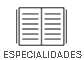
<style>
.page{position:relative;width:84px;height:60px;background:#ffffff}
.page>*{position:absolute;margin:0}
.t1{font:10px "Roboto-Thin";color:#4f4f4f}
</style>
<div class="page">
<p class="t1" style="left:4px;top:51px;width:78px;height:7px">ESPECIALIDADES</p>
</div>
